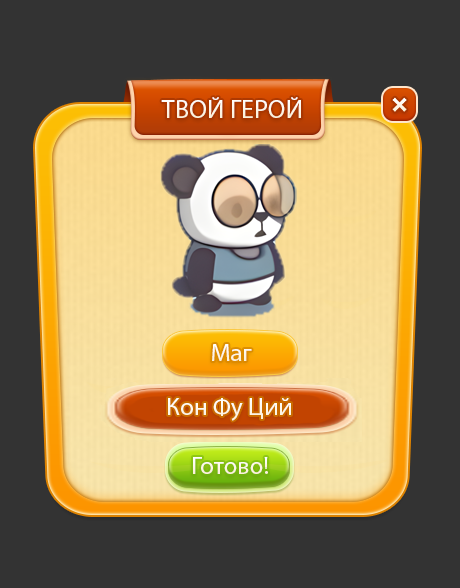
<style>
.page{position:relative;width:460px;height:588px;background:#333333}
.page>*{position:absolute;margin:0}
.t1{font:26px "MyriadPro-Regular";color:#ffffff}
.t2{font:25px "MyriadPro-Regular";color:#fdf6e8}
.t3{font:25px "MyriadPro-Regular";color:#ffffff}
</style>
<div class="page">
<p class="t1" style="left:161px;top:97px;width:140px;height:21px">ТВОЙ ГЕРОЙ</p>
<p class="t2" style="left:212px;top:344px;width:40px;height:17px">Маг</p>
<p class="t3" style="left:168px;top:398px;width:123px;height:23px">Кон Фу Ций</p>
<p class="t2" style="left:193px;top:457px;width:75px;height:17px">Готово!</p>
</div>
